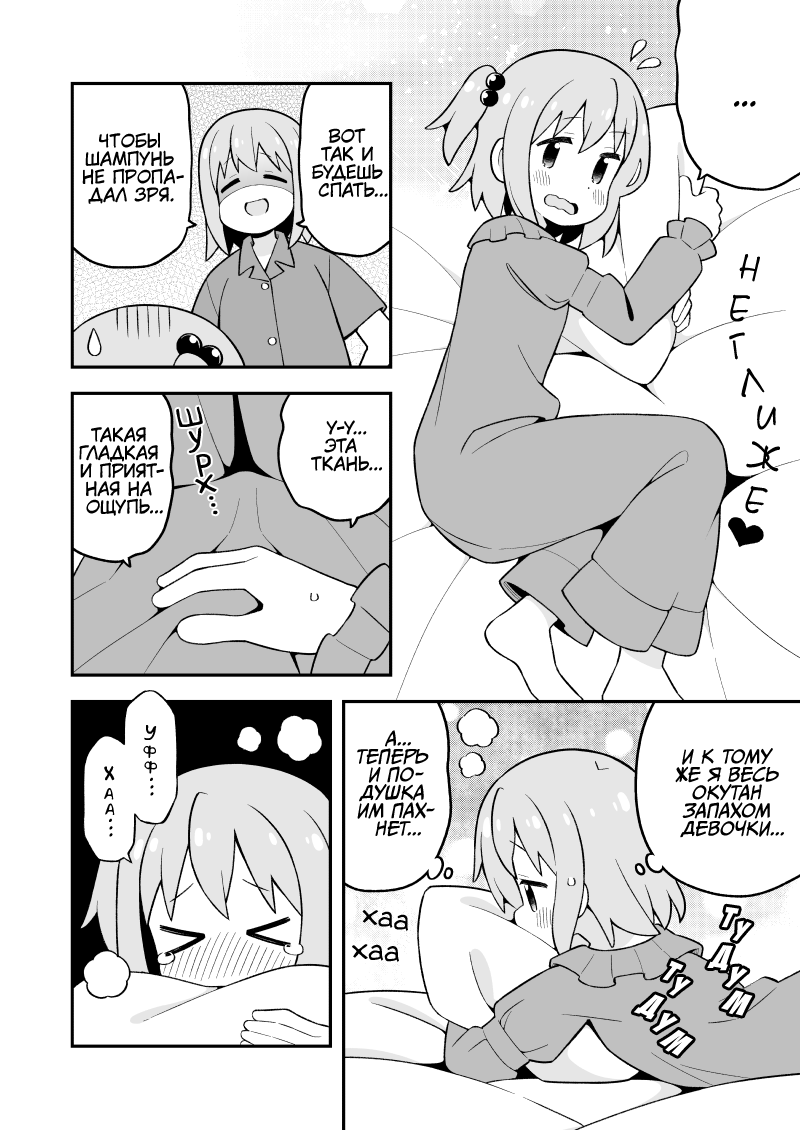
<style>
.page{position:relative;width:800px;height:1130px;background:#ffffff}
.page>*{position:absolute;margin:0}
.t1{font:30px "KuraiVoice2";color:#000000;text-transform:uppercase}
.t2{font:18px "KuraiVoice2";color:#000000;text-transform:uppercase}
.t3{font:36px "DSNote";color:#000000;font-weight:bold;scale:0.8 1}
.t4{font:36px "v_Augie";color:#000000}
.t5{font:18px "AkbarPlain";color:#000000}
.t6{font:18px "CCMeanwhile";color:#000000;text-transform:uppercase;font-style:italic}
.t7{font:16px "AkbarPlain";color:#000000}
.t8{font:30px "v_Augie";color:#000000}
.t9{font:33px "BadaBoom";color:#ffffff}
.t10{font:36px "BadaBoom";color:#ffffff}
</style>
<div class="page">
<p class="t1" style="left:734px;top:101px;width:22px;height:6px">...</p>
<p class="t2" style="left:82px;top:132px;width:102px;height:72px;text-align:center">Чтобы<br>шампунь<br>не пропа-<br>дал зря.</p>
<p class="t2" style="left:312px;top:128px;width:76px;height:70px;text-align:center">Вот<br>так и<br>будешь<br>спать...</p>
<p class="t3" style="left:739px;top:254px;width:21px;height:28px;rotate:12deg">н</p>
<p class="t3" style="left:730px;top:294px;width:20px;height:28px;rotate:8deg">е</p>
<p class="t3" style="left:729px;top:332px;width:16px;height:28px;rotate:-8deg">г</p>
<p class="t3" style="left:741px;top:368px;width:24px;height:30px;rotate:-8deg">л</p>
<p class="t4" style="left:176px;top:406px;width:27px;height:21px;rotate:-9deg">ш</p>
<p class="t3" style="left:757px;top:405px;width:19px;height:25px;rotate:-4deg">и</p>
<p class="t2" style="left:311px;top:420px;width:71px;height:52px;text-align:center">У-у...<br>Эта<br>ткань...</p>
<p class="t2" style="left:79px;top:427px;width:85px;height:89px;text-align:center">Такая<br>гладкая<br>и прият-<br>ная на<br>ощупь...</p>
<p class="t4" style="left:188px;top:426px;width:14px;height:27px;rotate:2deg">у</p>
<p class="t3" style="left:746px;top:441px;width:34px;height:31px;rotate:8deg">ж</p>
<p class="t4" style="left:196px;top:454px;width:15px;height:23px;rotate:-6deg">р</p>
<p class="t4" style="left:195px;top:474px;width:22px;height:20px;rotate:-8deg">х</p>
<p class="t3" style="left:745px;top:486px;width:23px;height:28px;rotate:16deg">е</p>
<p class="t4" style="left:209px;top:496px;width:5px;height:4px">.</p>
<p class="t4" style="left:211px;top:503px;width:5px;height:4px">.</p>
<p class="t4" style="left:213px;top:510px;width:5px;height:5px">.</p>
<p class="t5" style="left:144px;top:725px;width:13px;height:15px">У</p>
<p class="t6" style="left:357px;top:730px;width:78px;height:107px;text-align:center">А...<br>Теперь<br>и по-<br>душка<br>им пах-<br>нет...</p>
<p class="t7" style="left:143px;top:745px;width:13px;height:13px">ф</p>
<p class="t6" style="left:675px;top:748px;width:109px;height:90px;text-align:center">И к тому<br>же я весь<br>окутан<br>запахом<br>девочки...</p>
<p class="t7" style="left:144px;top:761px;width:13px;height:13px">ф</p>
<p class="t5" style="left:104px;top:766px;width:11px;height:15px">Х</p>
<p class="t5" style="left:150px;top:777px;width:3px;height:4px">.</p>
<p class="t5" style="left:150px;top:785px;width:4px;height:4px">.</p>
<p class="t7" style="left:104px;top:788px;width:10px;height:12px">а</p>
<p class="t5" style="left:150px;top:792px;width:4px;height:4px">.</p>
<p class="t7" style="left:105px;top:803px;width:10px;height:12px">а</p>
<p class="t5" style="left:109px;top:818px;width:3px;height:4px">.</p>
<p class="t5" style="left:109px;top:826px;width:4px;height:4px">.</p>
<p class="t5" style="left:109px;top:833px;width:4px;height:4px">.</p>
<p class="t8" style="left:362px;top:910px;width:46px;height:21px;rotate:11deg">хаа</p>
<p class="t9" style="left:721px;top:906px;width:18px;height:22px;rotate:15deg">т</p>
<p class="t9" style="left:732px;top:920px;width:20px;height:21px;rotate:14deg">у</p>
<p class="t8" style="left:352px;top:944px;width:47px;height:18px;rotate:5deg">хаа</p>
<p class="t10" style="left:707px;top:945px;width:26px;height:26px;rotate:15deg">д</p>
<p class="t9" style="left:662px;top:960px;width:22px;height:21px;rotate:29deg">т</p>
<p class="t10" style="left:724px;top:966px;width:24px;height:22px;rotate:21deg">у</p>
<p class="t9" style="left:669px;top:977px;width:22px;height:19px;rotate:25deg">у</p>
<p class="t10" style="left:721px;top:990px;width:32px;height:26px;rotate:24deg">м</p>
<p class="t10" style="left:633px;top:994px;width:32px;height:26px;rotate:31deg">д</p>
<p class="t10" style="left:652px;top:1012px;width:26px;height:21px;rotate:34deg">у</p>
<p class="t10" style="left:659px;top:1029px;width:34px;height:27px;rotate:40deg">м</p>
</div>
